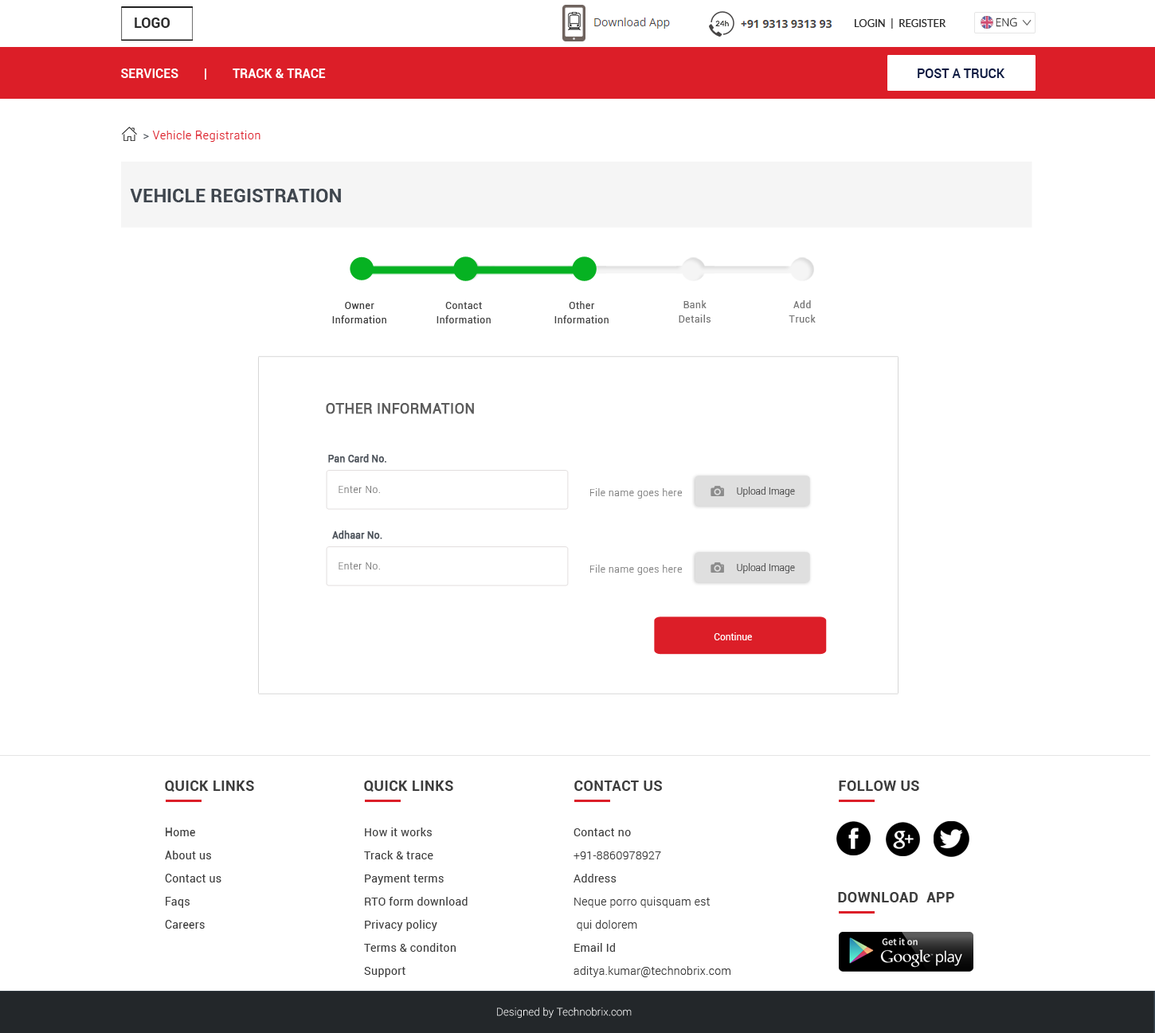
<style>
.page{position:relative;width:1155px;height:1033px;background:#ffffff}
.page>*{position:absolute;margin:0}
.t1{font:14.3px "Roboto-Bold";color:#2c2c2c}
.t2{font:11.1px "OpenSans-Light";color:#2c2c2c}
.t3{font:10.4px "Lato-Regular";color:#2c2c2c;text-transform:uppercase}
.t4{font:12.7px "Roboto-Bold";color:#ffffff;text-transform:uppercase}
.t5{font:12.7px "Roboto-Medium";color:#0d1a41}
.t6{font:11.1px "Roboto-Light";letter-spacing:0.05em;color:#dc1e28}
.t7{font:11.1px "Roboto-Light";letter-spacing:0.05em;color:#3f464e}
.t8{font:19.1px "Roboto-Bold";color:#3f464e;text-transform:uppercase}
.t9{font:9.6px/14.3px "Roboto-Regular";letter-spacing:0.05em;color:#3c3c3c}
.t10{font:9.6px/14.3px "Roboto-Regular";letter-spacing:0.05em;color:#444444}
.t11{font:9.6px/14.3px "Roboto-Regular";letter-spacing:0.05em;color:#777777}
.t12{font:14.3px "Roboto-Regular";color:#5c5c5c;font-weight:bold}
.t13{font:9.6px "Roboto-Regular";color:#4c525a;font-weight:bold}
.t14{font:9.6px "Roboto-Light";letter-spacing:0.05em;color:#777777}
.t15{font:9.6px "Roboto-Light";color:#444444}
.t16{font:9.6px "Roboto-Regular";color:#ffffff}
.t17{font:14.3px "Roboto-Bold";letter-spacing:0.025em;color:#3c3c3c}
.t18{font:11.1px/23.1px "Roboto-Regular";letter-spacing:0.025em;color:#3c3c3c}
.t19{font:11.1px/23.1px "Roboto-Light";letter-spacing:0.025em;color:#3c3c3c}
.t20{font:10.4px "Roboto-Thin";letter-spacing:0.025em;color:#ffffff}
</style>
<div class="page">
<p class="t1" style="left:135px;top:18px;width:35px;height:10px">LOGO</p>
<p class="t2" style="left:995px;top:18px;width:22px;height:9px">ENG</p>
<p class="t3" style="left:854px;top:18px;width:92px;height:11px">Login  |  Register</p>
<p class="t4" style="left:121px;top:68px;width:205px;height:12px">Services        |        Track &amp; TraCe</p>
<p class="t5" style="left:917px;top:68px;width:88px;height:10px">POST A TRUCK</p>
<p class="t6" style="left:143px;top:131px;width:117px;height:11px"><span class="t7">&gt; </span>Vehicle Registration</p>
<p class="t8" style="left:130px;top:189px;width:211px;height:13px">Vehicle Registration</p>
<p class="t9" style="left:332px;top:302px;width:54px;height:21px;text-align:center">Owner<br>Information</p>
<p class="t10" style="left:436px;top:302px;width:55px;height:21px;text-align:center">Contact<br>Information</p>
<p class="t10" style="left:554px;top:301px;width:54px;height:22px;text-align:center">Other<br>Information</p>
<p class="t11" style="left:678px;top:300px;width:32px;height:22px;text-align:center">Bank<br>Details</p>
<p class="t11" style="left:788px;top:300px;width:27px;height:22px;text-align:center">Add<br>Truck</p>
<p class="t12" style="left:326px;top:403px;width:148px;height:11px">OTHER INFORMATION</p>
<p class="t13" style="left:328px;top:454px;width:58px;height:9px">Pan Card No.</p>
<p class="t14" style="left:338px;top:486px;width:42px;height:7px">Enter No.</p>
<p class="t14" style="left:590px;top:488px;width:92px;height:10px">File name goes here</p>
<p class="t15" style="left:737px;top:487px;width:58px;height:10px">Upload Image</p>
<p class="t13" style="left:332px;top:530px;width:50px;height:9px">Adhaar No.</p>
<p class="t14" style="left:338px;top:562px;width:42px;height:7px">Enter No.</p>
<p class="t14" style="left:590px;top:565px;width:92px;height:10px">File name goes here</p>
<p class="t15" style="left:737px;top:563px;width:58px;height:10px">Upload Image</p>
<p class="t16" style="left:713px;top:632px;width:39px;height:8px">Continue</p>
<p class="t17" style="left:165px;top:780px;width:89px;height:11px">QUICK LINKS</p>
<p class="t17" style="left:364px;top:780px;width:89px;height:11px">QUICK LINKS</p>
<p class="t17" style="left:574px;top:780px;width:88px;height:11px">CONTACT US</p>
<p class="t17" style="left:838px;top:780px;width:81px;height:11px">FOLLOW US</p>
<p class="t18" style="left:165px;top:827px;width:56px;height:101px">Home<br>About us <br>Contact us<br>Faqs<br>Careers</p>
<p class="t18" style="left:364px;top:827px;width:103px;height:150px">How it works<br>Track &amp; trace<br>Payment terms<br>RTO form download<br>Privacy policy <br>Terms &amp; conditon<br>Support</p>
<p class="t19" style="left:573px;top:828px;width:157px;height:149px"><span class="t18">Contact no<br></span>+91-8860978927<br><span class="t18">Address<br></span>Neque porro quisquam est<br> qui dolorem<br><span class="t18">Email Id<br></span>aditya.kumar@technobrix.com</p>
<p class="t17" style="left:838px;top:892px;width:116px;height:10px">DOWNLOAD  APP</p>
<p class="t20" style="left:497px;top:1006px;width:134px;height:12px">Designed by Technobrix.com</p>
</div>
